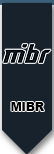
<style>
.page{position:relative;width:54px;height:154px;background:#17222d}
.page>*{position:absolute;margin:0}
.t1{font:11.7px "Arial-Black";letter-spacing:-0.01em;color:#000000}
</style>
<div class="page">
<p class="t1" style="left:11px;top:102px;width:33px;height:9px">MIBR</p>
</div>
